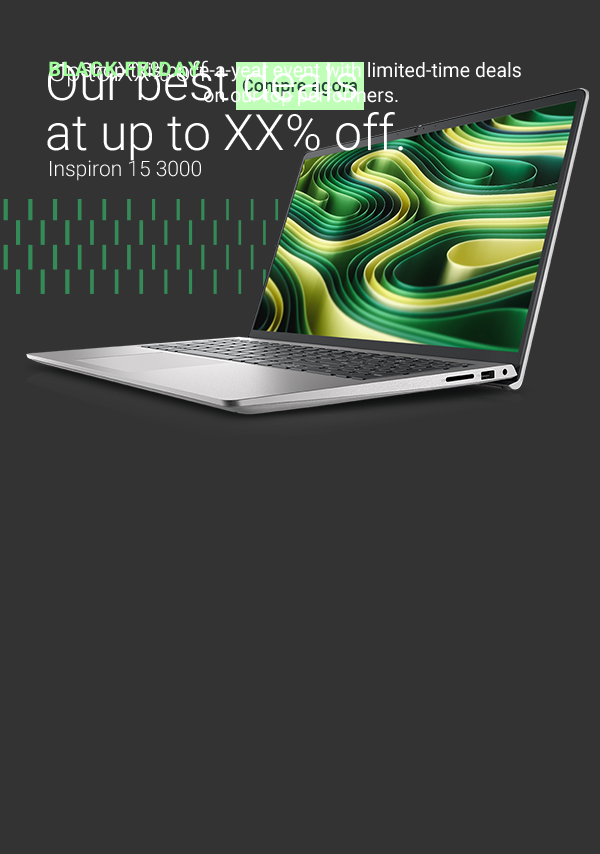
<style>
.page{position:relative;width:600px;height:854px;background:#333333}
.page>*{position:absolute;margin:0}
.t1{font:50px/50px "Roboto-Light";color:#ffffff}
.t2{font:20px "Roboto-Bold";letter-spacing:0.04em;color:#9fff99;text-transform:uppercase}
.t3{font:26.8px "Roboto-Light";color:#ffffff}
.t4{font:20px/25px "Roboto-Regular";color:#ffffff}
.t5{font:18px "Roboto-Medium"}
.t6{font:21.2px "Roboto-Light";color:#ffffff}
</style>
<div class="page">
<p class="t1" style="left:47px;top:62px;width:356px;height:99px">Our best deals <br>at up to XX% off.</p>
<p class="t2" style="left:49px;top:61px;width:152px;height:16px">BLACK FRIDAY</p>
<p class="t3" style="left:50px;top:60px;width:158px;height:27px">Up to XX% off</p>
<p class="t4" style="left:81px;top:62px;width:440px;height:44px;text-align:center">Shop this once-a-year event with limited-time deals<br>on our top performers.</p>
<p class="t5" style="left:242px;top:79px;width:116px;height:17px">Compre agora</p>
<p class="t6" style="left:50px;top:160px;width:151px;height:21px">Inspiron 15 3000</p>
</div>
